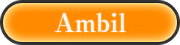
<style>
.page{position:relative;width:180px;height:45px;background:#ff8a00}
.page>*{position:absolute;margin:0}
.t1{font:25px "RyuminPro-ExBold";color:#fff6f3}
</style>
<div class="page">
<p class="t1" style="left:55px;top:13px;width:71px;height:19px">Ambil</p>
</div>
